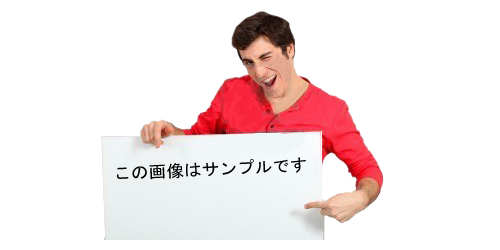
<style>
.page{position:relative;width:500px;height:250px;background:#ffffff}
.page>*{position:absolute;margin:0}
.t1{font:16.7px/75px "MS-Gothic";letter-spacing:0.01em;color:#000000;scale:1.05 1}
.t2{font:25px/75px "MS-Gothic";letter-spacing:0.01em;color:#000000;scale:1.05 1}
</style>
<div class="page">
<p class="t1" style="left:117px;top:157px;width:189px;height:23px;rotate:-3deg">この画像はサンプルです<br>で<br><span class="t2">さ</span></p>
</div>
